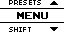
<style>
.page{position:relative;width:64px;height:32px;background:#ffffff}
.page>*{position:absolute;margin:0}
.t1{font:8px "04b03";color:#000000;scale:1.06 1}
.t2{font:14px "ArcadeClassic";color:#000000;scale:1.05 1}
</style>
<div class="page">
<p class="t1" style="left:9px;top:0px;width:32px;height:5px">PRESETS</p>
<p class="t2" style="left:17px;top:12px;width:31px;height:7px">MENU</p>
<p class="t1" style="left:9px;top:27px;width:22px;height:5px">SHIFT</p>
</div>
